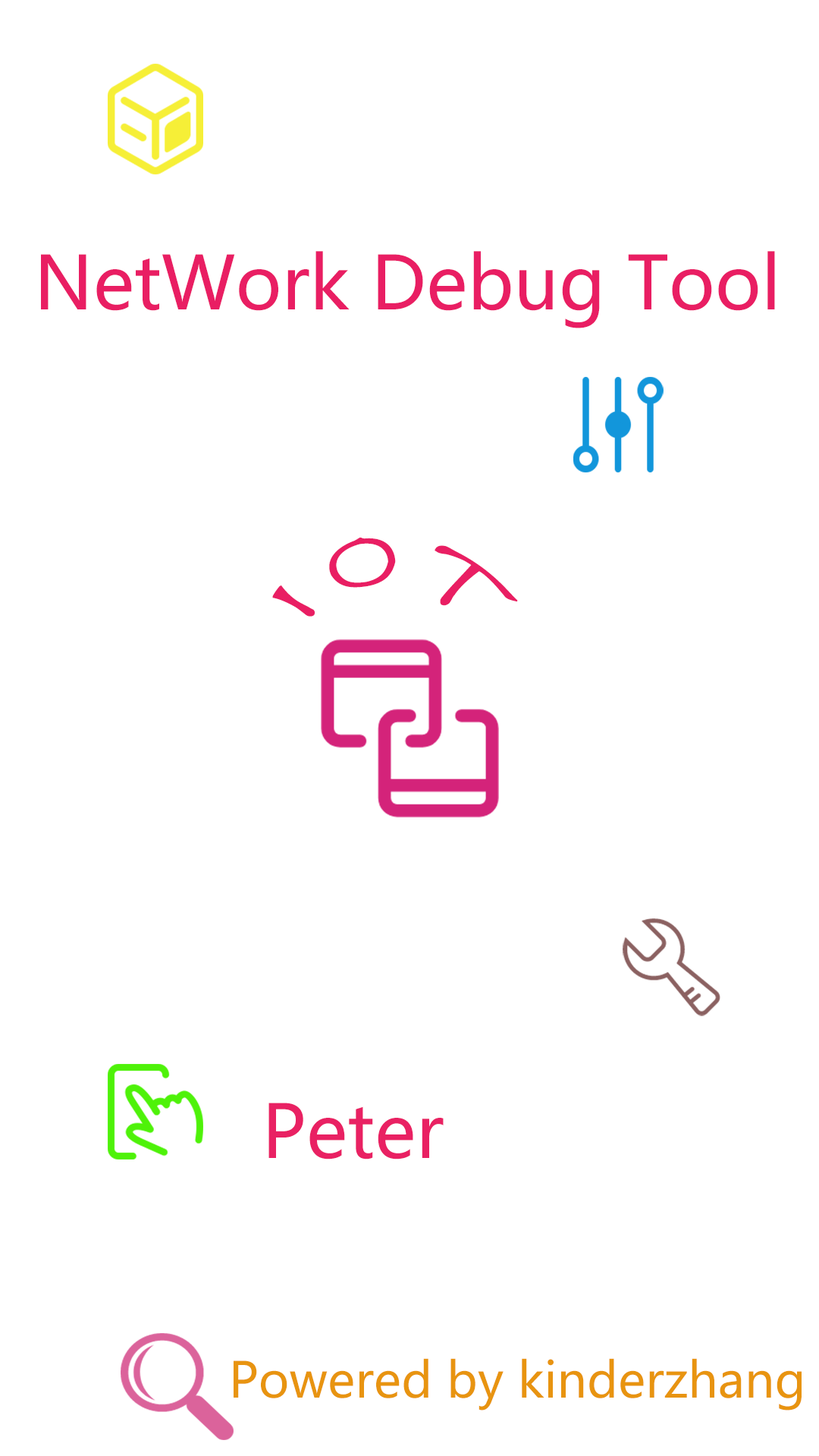
<style>
.page{position:relative;width:819px;height:1456px;background:#ffffff}
.page>*{position:absolute;margin:0}
.t1{font:72.8px "MicrosoftYaHei";color:#e91e63}
.t2{font:72.8px "FZSTK--GBK1-0";color:#e91e63}
.t3{font:72.8px "MicrosoftYaHei";color:#e92163}
.t4{font:48.5px "MicrosoftYaHei";color:#e89410}
</style>
<div class="page">
<p class="t1" style="left:41px;top:251px;width:734px;height:77px">NetWork Debug Tool</p>
<p class="t2" style="left:272px;top:537px;width:246px;height:80px">I O T</p>
<p class="t3" style="left:268px;top:1103px;width:176px;height:56px">Peter</p>
<p class="t4" style="left:234px;top:1358px;width:568px;height:52px">Powered by kinderzhang</p>
</div>
